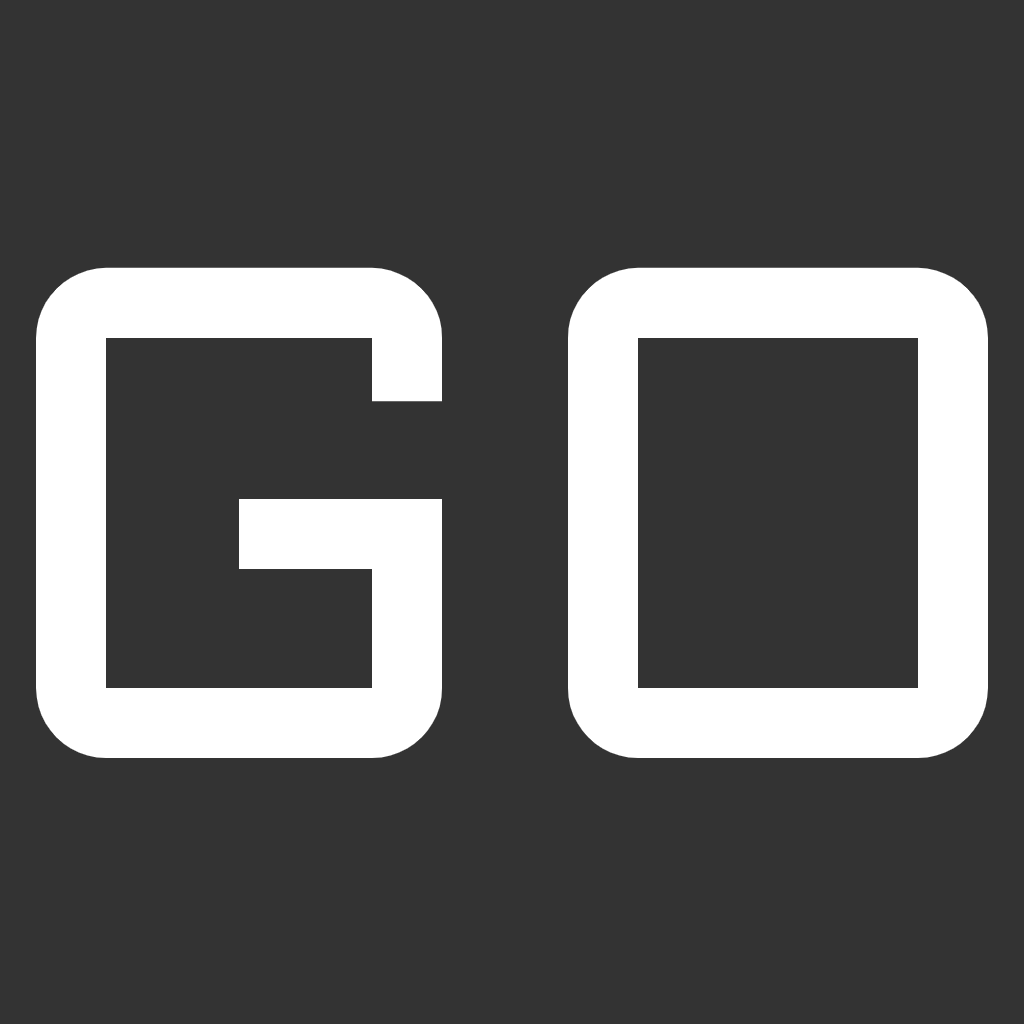
<style>
.page{position:relative;width:1024px;height:1024px;background:#333333}
.page>*{position:absolute;margin:0}
.t1{font:700px "Aldrich-Regular";color:#ffffff}
</style>
<div class="page">
<p class="t1" style="left:36px;top:267px;width:952px;height:491px">GO</p>
</div>
